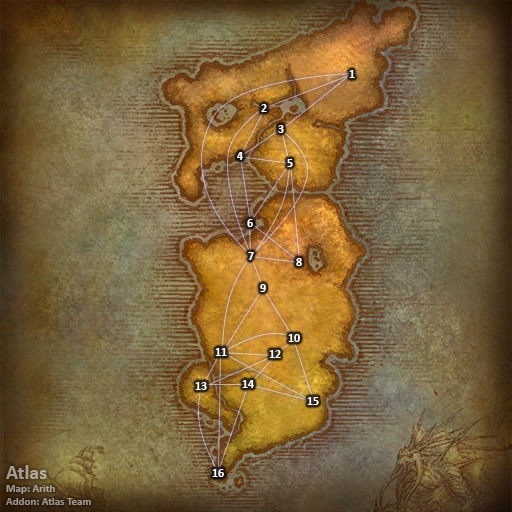
<style>
.page{position:relative;width:512px;height:512px}
.page>*{position:absolute;margin:0}
.t1{font:12px "Calibri-Bold";color:#ffffff}
.t2{font:11px "Calibri-Bold";color:#a59b92}
.t3{font:20px "Calibri-Bold";color:#a59b92}
</style>
<div class="page">
<p class="t1" style="left:349px;top:70px;width:6px;height:8px">1</p>
<p class="t1" style="left:261px;top:104px;width:6px;height:8px">2</p>
<p class="t1" style="left:278px;top:125px;width:6px;height:8px">3</p>
<p class="t1" style="left:237px;top:152px;width:6px;height:8px">4</p>
<p class="t1" style="left:287px;top:159px;width:6px;height:8px">5</p>
<p class="t1" style="left:247px;top:219px;width:6px;height:8px">6</p>
<p class="t1" style="left:248px;top:252px;width:6px;height:8px">7</p>
<p class="t1" style="left:296px;top:258px;width:6px;height:8px">8</p>
<p class="t1" style="left:260px;top:284px;width:6px;height:8px">9</p>
<p class="t1" style="left:288px;top:334px;width:12px;height:8px">10</p>
<p class="t1" style="left:215px;top:348px;width:12px;height:8px">11</p>
<p class="t1" style="left:269px;top:350px;width:12px;height:8px">12</p>
<p class="t1" style="left:195px;top:382px;width:12px;height:8px">13</p>
<p class="t1" style="left:242px;top:380px;width:12px;height:8px">14</p>
<p class="t1" style="left:307px;top:397px;width:12px;height:8px">15</p>
<p class="t2" style="left:6px;top:465px;width:85px;height:40px"><span class="t3">Atlas<br></span>Map: Arith<br>Addon: Atlas Team</p>
<p class="t1" style="left:212px;top:469px;width:12px;height:8px">16</p>
</div>
